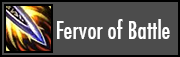
<style>
.page{position:relative;width:180px;height:57px;background:#4c4c4c}
.page>*{position:absolute;margin:0}
.t1{font:24px "FuturaCondensed";color:#ffffff}
</style>
<div class="page">
<p class="t1" style="left:57px;top:19px;width:113px;height:20px">Fervor of Battle</p>
</div>
